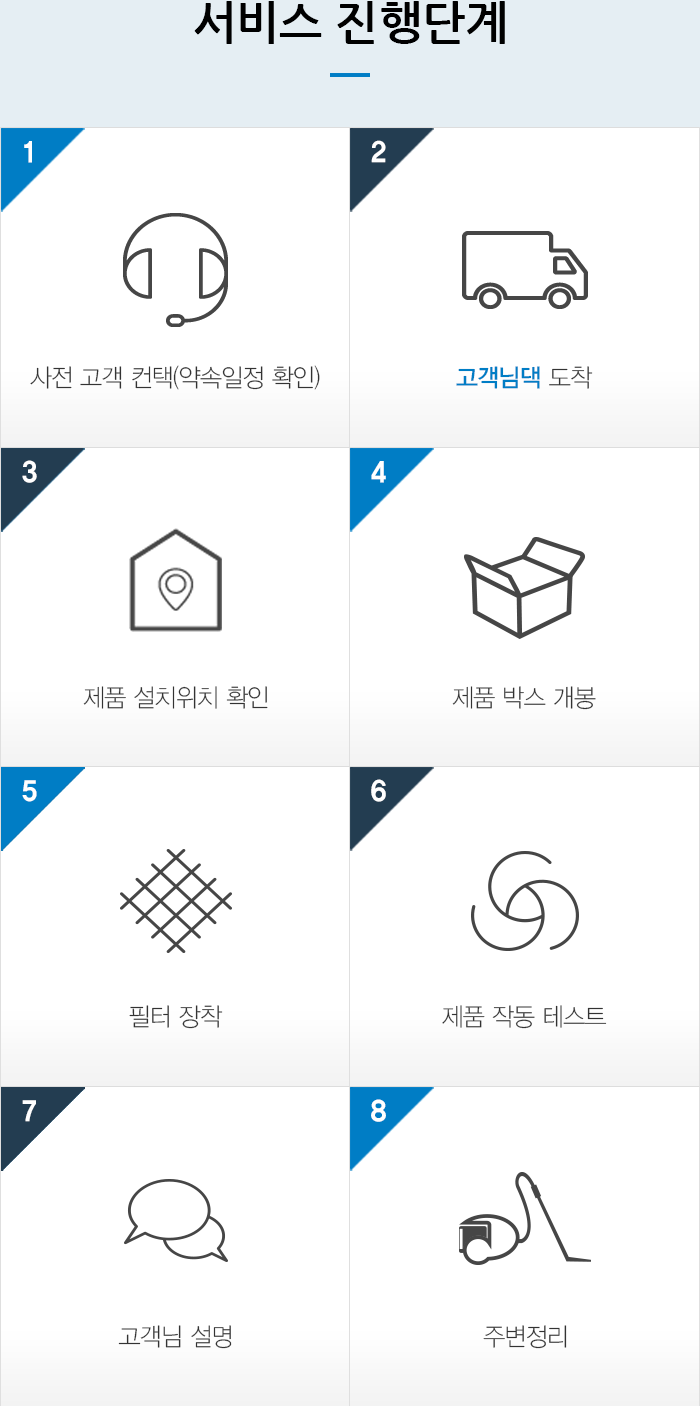
<style>
.page{position:relative;width:700px;height:1406px;background:#ffffff}
.page>*{position:absolute;margin:0}
.t1{font:46px "NanumGothicBold";color:#000000}
.t2{font:28px "YDVYGO36";letter-spacing:-0.025em;color:#ffffff;scale:0.95 1}
.t3{font:25px "YDVYGO31";letter-spacing:-0.025em;color:#333333;scale:0.95 1}
.t4{font:25px "YDVYGO33";letter-spacing:-0.025em;color:#007dc5;scale:0.95 1}
</style>
<div class="page">
<p class="t1" style="left:194px;top:1px;width:311px;height:43px">서비스 진행단계</p>
<p class="t2" style="left:24px;top:141px;width:8px;height:22px">1</p>
<p class="t2" style="left:371px;top:140px;width:15px;height:23px">2</p>
<p class="t3" style="left:30px;top:365px;width:290px;height:25px">사전 고객 컨택(약속일정 확인)</p>
<p class="t4" style="left:456px;top:366px;width:137px;height:23px">고객님댁<span class="t3"> 도착</span></p>
<p class="t2" style="left:22px;top:460px;width:15px;height:23px">3</p>
<p class="t2" style="left:371px;top:461px;width:15px;height:22px">4</p>
<p class="t3" style="left:83px;top:686px;width:185px;height:23px">제품 설치위치 확인</p>
<p class="t3" style="left:452px;top:686px;width:144px;height:24px">제품 박스 개봉</p>
<p class="t2" style="left:22px;top:780px;width:15px;height:22px">5</p>
<p class="t2" style="left:371px;top:779px;width:15px;height:23px">6</p>
<p class="t3" style="left:129px;top:1005px;width:94px;height:24px">필터 장착</p>
<p class="t3" style="left:442px;top:1005px;width:165px;height:24px">제품 작동 테스트</p>
<p class="t2" style="left:22px;top:1100px;width:14px;height:22px">7</p>
<p class="t2" style="left:371px;top:1099px;width:15px;height:23px">8</p>
<p class="t3" style="left:118px;top:1325px;width:114px;height:24px">고객님 설명</p>
<p class="t3" style="left:483px;top:1325px;width:84px;height:24px">주변정리</p>
</div>
